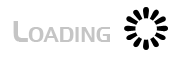
<style>
.page{position:relative;width:181px;height:57px;background:#ffffff}
.page>*{position:absolute;margin:0}
.t1{font:21px "Slicker";color:#c5c5c5}
.t2{font:30px "Slicker";color:#c5c5c5}
</style>
<div class="page">
<p class="t1" style="left:13px;top:21px;width:97px;height:21px"><span class="t2">L</span>OADING</p>
</div>
